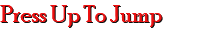
<style>
.page{position:relative;width:200px;height:30px;background:#ffffff}
.page>*{position:absolute;margin:0}
.t1{font:25px "PoorRichard-Regular";color:#ed1111}
</style>
<div class="page">
<p class="t1" style="left:0px;top:5px;width:162px;height:22px">Press Up To Jump</p>
<p class="t1" style="left:0px;top:5px;width:162px;height:22px">Press Up To Jump</p>
</div>
